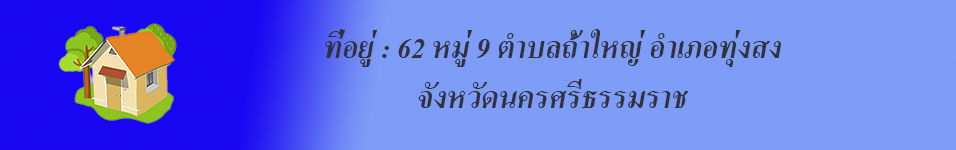
<style>
.page{position:relative;width:956px;height:150px}
.page>*{position:absolute;margin:0}
.t1{font:42px "AngsanaNew-BoldItalic";color:#32313f}
</style>
<div class="page">
<p class="t1" style="left:325px;top:29px;width:456px;height:79px;text-align:center">ที่อยู่ : 62 หมู่ 9 ตำบลถ้ำใหญ่ อำเภอทุ่งสง จังหวัดนครศรีธรรมราช</p>
</div>
